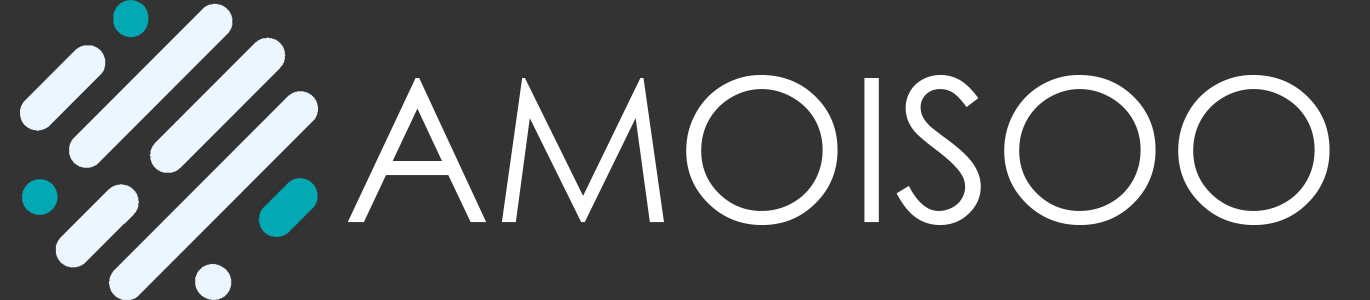
<style>
.page{position:relative;width:1370px;height:300px;background:#333333}
.page>*{position:absolute;margin:0}
.t1{font:200px "CenturyGothic";color:#ffffff}
</style>
<div class="page">
<p class="t1" style="left:347px;top:75px;width:983px;height:150px">AMOISOO</p>
</div>
